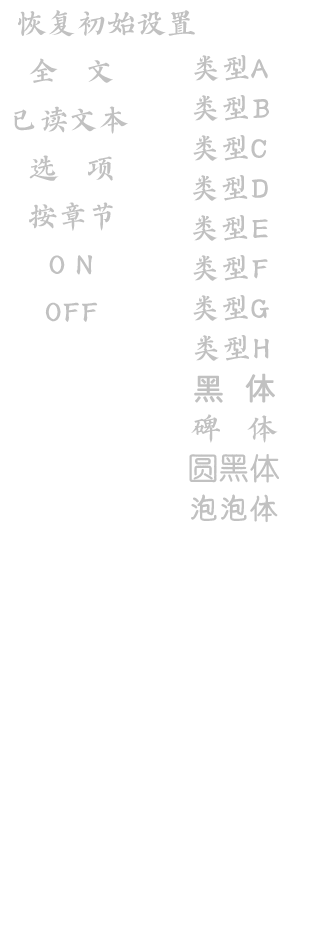
<style>
.page{position:relative;width:320px;height:941px;background:#ffffff}
.page>*{position:absolute;margin:0}
.t1{font:30px "AaYZQDBTBNon-CommercialUse";color:#c1c1c1}
.t2{font:30px "SJluoliheijianfancu";color:#c1c1c1}
.t3{font:30px "gongfanmeilizhongyuan-Regular";color:#c1c1c1}
.t4{font:30px "AaKAPFTZJNon-CommercialUse";color:#c1c1c1}
</style>
<div class="page">
<p class="t1" style="left:18px;top:10px;width:177px;height:27px">恢复初始设置</p>
<p class="t1" style="left:29px;top:58px;width:84px;height:25px">全   文</p>
<p class="t1" style="left:194px;top:55px;width:74px;height:26px">类型A</p>
<p class="t1" style="left:193px;top:95px;width:76px;height:26px">类型B</p>
<p class="t1" style="left:14px;top:106px;width:114px;height:28px">已读文本</p>
<p class="t1" style="left:193px;top:135px;width:74px;height:26px">类型C</p>
<p class="t1" style="left:29px;top:155px;width:84px;height:26px">选   项</p>
<p class="t1" style="left:193px;top:175px;width:75px;height:26px">类型D</p>
<p class="t1" style="left:29px;top:202px;width:84px;height:29px">按章节</p>
<p class="t1" style="left:193px;top:215px;width:75px;height:26px">类型E</p>
<p class="t1" style="left:49px;top:255px;width:44px;height:20px">O N</p>
<p class="t1" style="left:193px;top:255px;width:75px;height:26px">类型F</p>
<p class="t1" style="left:45px;top:302px;width:53px;height:20px">OFF</p>
<p class="t1" style="left:193px;top:295px;width:77px;height:26px">类型G</p>
<p class="t1" style="left:194px;top:335px;width:75px;height:26px">类型H</p>
<p class="t2" style="left:194px;top:373px;width:81px;height:30px">黑   体</p>
<p class="t1" style="left:191px;top:414px;width:87px;height:29px">碑   体</p>
<p class="t3" style="left:189px;top:454px;width:90px;height:29px">圆黑体</p>
<p class="t4" style="left:191px;top:494px;width:87px;height:29px">泡泡体</p>
</div>
